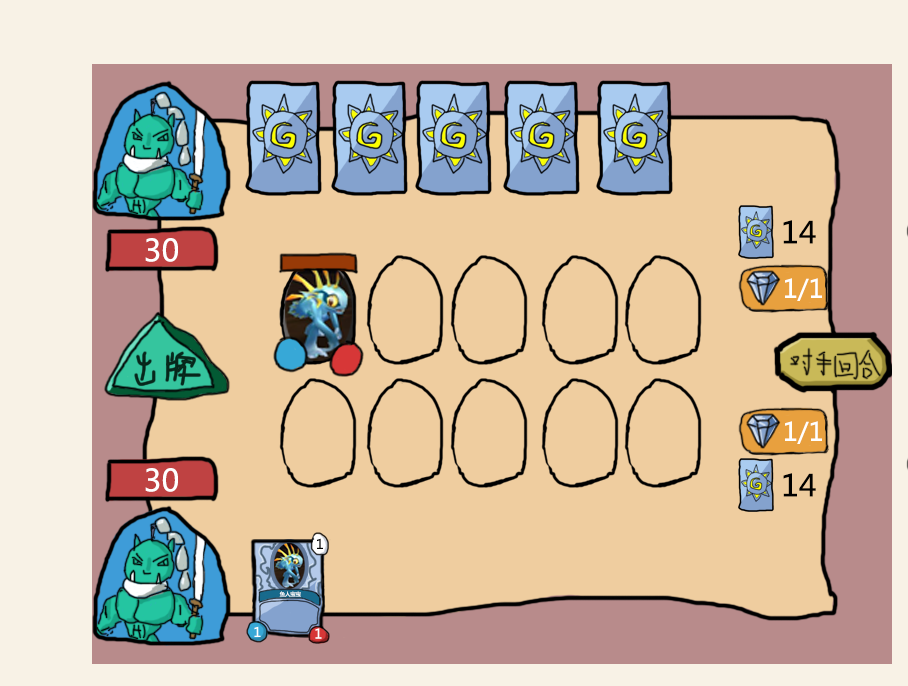
<style>
.page{position:relative;width:908px;height:686px;background:#efcd9f}
.page>*{position:absolute;margin:0}
.t1{font:30px "MicrosoftYaHei";letter-spacing:0.01em;color:#000000}
.t2{font:30px "MicrosoftYaHei";letter-spacing:0.01em;color:#ffffff}
.t3{font:25px "MicrosoftYaHei";letter-spacing:0.01em;color:#fffffe}
.t4{font:13px "MicrosoftYaHei";letter-spacing:0.01em;color:#010101}
.t5{font:5.2px "MicrosoftYaHei";letter-spacing:0.01em;color:#ffffff}
.t6{font:13px "MicrosoftYaHei";letter-spacing:0.01em;color:#ffffff}
</style>
<div class="page">
<p class="t1" style="left:783px;top:220px;width:33px;height:24px">14</p>
<p class="t2" style="left:145px;top:238px;width:33px;height:24px">30</p>
<p class="t3" style="left:785px;top:278px;width:37px;height:23px">1/1</p>
<p class="t3" style="left:785px;top:421px;width:37px;height:23px">1/1</p>
<p class="t2" style="left:145px;top:468px;width:33px;height:24px">30</p>
<p class="t1" style="left:783px;top:473px;width:33px;height:24px">14</p>
<p class="t4" style="left:317px;top:538px;width:6px;height:11px">1</p>
<p class="t5" style="left:279px;top:591px;width:22px;height:6px">鱼人宝宝</p>
<p class="t6" style="left:254px;top:626px;width:7px;height:11px">1</p>
<p class="t6" style="left:315px;top:628px;width:7px;height:11px">1</p>
</div>
